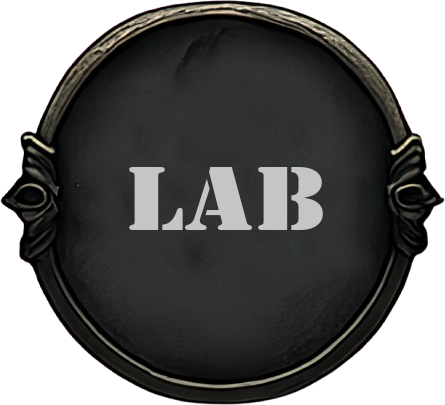
<style>
.page{position:relative;width:445px;height:405px;background:#ffffff}
.page>*{position:absolute;margin:0}
.t1{font:93.7px "Stencil";letter-spacing:0.02em;color:#c5c5c5;scale:1.15 1}
</style>
<div class="page">
<p class="t1" style="left:129px;top:167px;width:194px;height:63px">LAB</p>
</div>
